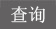
<style>
.page{position:relative;width:56px;height:29px;background:#636162}
.page>*{position:absolute;margin:0}
.t1{font:18px "SimSun";color:#ffffff}
</style>
<div class="page">
<p class="t1" style="left:11px;top:6px;width:34px;height:17px">查询</p>
</div>
